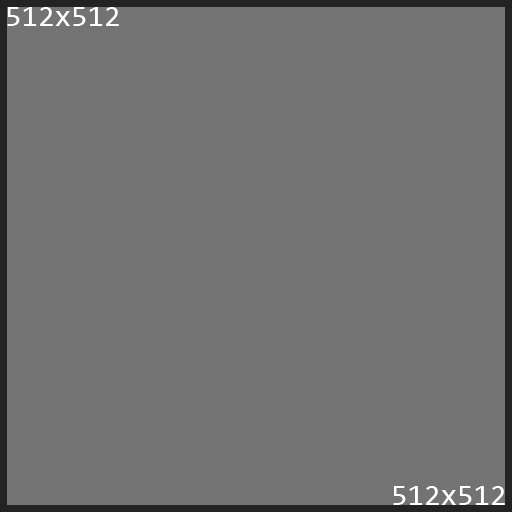
<style>
.page{position:relative;width:512px;height:512px;background:#737373}
.page>*{position:absolute;margin:0}
.t1{font:30px "Consolas";color:#ffffff}
</style>
<div class="page">
<p class="t1" style="left:7px;top:7px;width:112px;height:19px">512x512</p>
<p class="t1" style="left:393px;top:486px;width:112px;height:19px">512x512</p>
</div>
